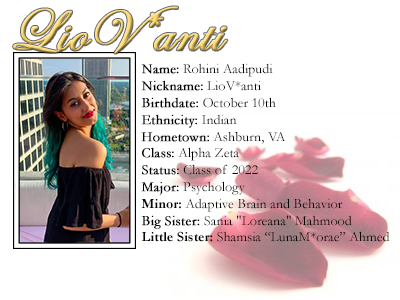
<style>
.page{position:relative;width:400px;height:300px;background:#ffffff}
.page>*{position:absolute;margin:0}
.t1{font:60px "EdwardianScriptITC";font-weight:bold}
.t2{font:14px "Garamond";color:#000000}
.t3{font:14px "Garamond";color:#000000;font-weight:bold}
.t4{font:14px "Garamond-Bold";color:#000000}
</style>
<div class="page">
<p class="t1" style="left:13px;top:6px;width:215px;height:48px">LioV*anti</p>
<p class="t2" style="left:141px;top:63px;width:249px;height:179px"><span class="t3">Name:</span> Rohini Aadipudi<br><span class="t3">Nickname:</span> LioV*anti<br><span class="t3">Birthdate:</span> October 10th<br><span class="t3">Ethnicity:</span> Indian<br><span class="t3">Hometown:</span> Ashburn, VA<br><span class="t3">Class:</span> Alpha Zeta<br><span class="t3">Status:</span> Class of 2022<br><span class="t3">Major:</span> Psychology<br><span class="t4">Minor:</span> Adaptive Brain and Behavior<br><span class="t3">Big Sister: </span>Sania "Loreana" Mahmood<br><span class="t4">Little Sister:</span> Shamsia “LunaM*orae” Ahmed</p>
</div>
